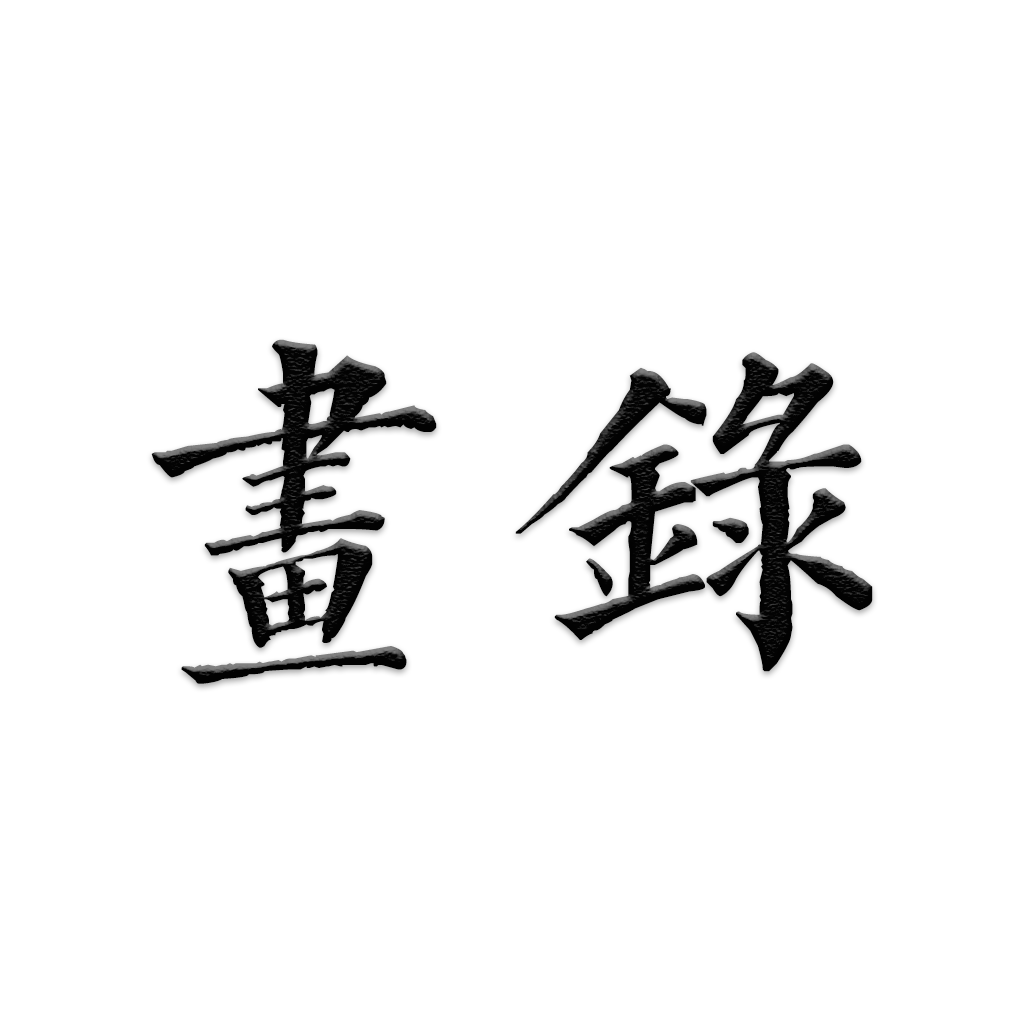
<style>
.page{position:relative;width:1024px;height:1024px;background:#ffffff}
.page>*{position:absolute;margin:0}
.t1{font:400px "zktqkt";color:#030303}
</style>
<div class="page">
<p class="t1" style="left:151px;top:339px;width:722px;height:345px">画录</p>
</div>
